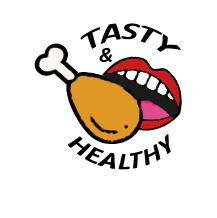
<style>
.page{position:relative;width:217px;height:218px;background:#ffffff}
.page>*{position:absolute;margin:0}
.t1{font:25.9px "Calibri-BoldItalic";color:#000000}
.t2{font:20.4px "Calibri-BoldItalic";color:#000000}
.t3{font:24px "Calibri-BoldItalic";color:#000000;scale:0.95 1}
</style>
<div class="page">
<p class="t1" style="left:80px;top:23px;width:101px;height:29px;rotate:6deg">TASTY</p>
<p class="t2" style="left:99px;top:48px;width:13px;height:14px">&amp;</p>
<p class="t3" style="left:67px;top:133px;width:104px;height:37px">HEALTHY</p>
</div>
